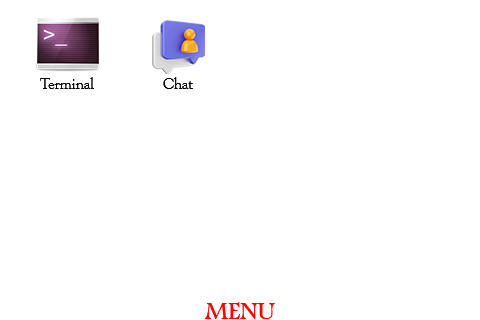
<style>
.page{position:relative;width:480px;height:320px;background:#ffffff}
.page>*{position:absolute;margin:0}
.t1{font:15.9px "GoudyOldStyleT-Regular";letter-spacing:-0.025em;color:#000000}
.t2{font:26.5px "FootlightMTLight";letter-spacing:-0.025em;color:#ff0000}
</style>
<div class="page">
<p class="t1" style="left:40px;top:77px;width:54px;height:12px">Terminal</p>
<p class="t1" style="left:163px;top:77px;width:30px;height:12px">Chat</p>
<p class="t2" style="left:205px;top:302px;width:70px;height:17px">MENU</p>
</div>
